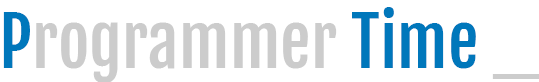
<style>
.page{position:relative;width:539px;height:82px;background:#ffffff}
.page>*{position:absolute;margin:0}
.t1{font:68px "FjallaOne-Regular";color:#cccccc}
.t2{font:68px "FjallaOne-Regular";color:#0077bb}
</style>
<div class="page">
<p class="t1" style="left:3px;top:7px;width:536px;height:76px"><span class="t2">P</span>rogrammer <span class="t2">Time </span>_</p>
</div>
